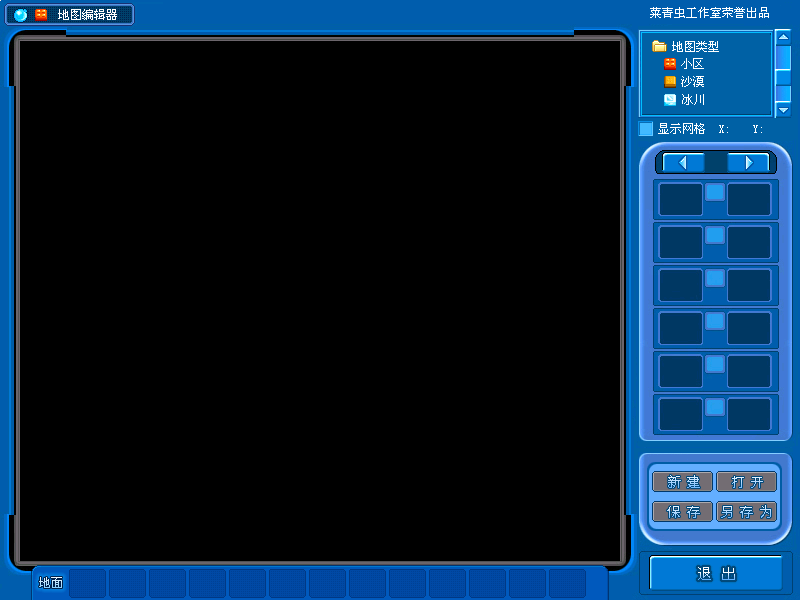
<style>
.page{position:relative;width:800px;height:600px;background:#000000}
.page>*{position:absolute;margin:0}
.t1{font:12px "SimSun";color:#ffffff}
.t2{font:13.3px "STXihei";letter-spacing:0.4em}
</style>
<div class="page">
<p class="t1" style="left:58px;top:9px;width:59px;height:11px">地图编辑器</p>
<p class="t1" style="left:672px;top:41px;width:47px;height:11px">地图类型</p>
<p class="t1" style="left:681px;top:58px;width:23px;height:11px">小区</p>
<p class="t1" style="left:681px;top:76px;width:23px;height:11px">沙漠</p>
<p class="t1" style="left:682px;top:94px;width:22px;height:11px">冰川</p>
<p class="t1" style="left:658px;top:123px;width:47px;height:11px">显示网格</p>
<p class="t1" style="left:719px;top:125px;width:9px;height:8px">X:</p>
<p class="t1" style="left:753px;top:125px;width:9px;height:8px">Y:</p>
<p class="t2" style="left:668px;top:475px;width:32px;height:13px">新建</p>
<p class="t2" style="left:732px;top:476px;width:31px;height:12px">打开</p>
<p class="t2" style="left:667px;top:506px;width:33px;height:12px">保存</p>
<p class="t2" style="left:721px;top:505px;width:50px;height:13px">另存为</p>
</div>
